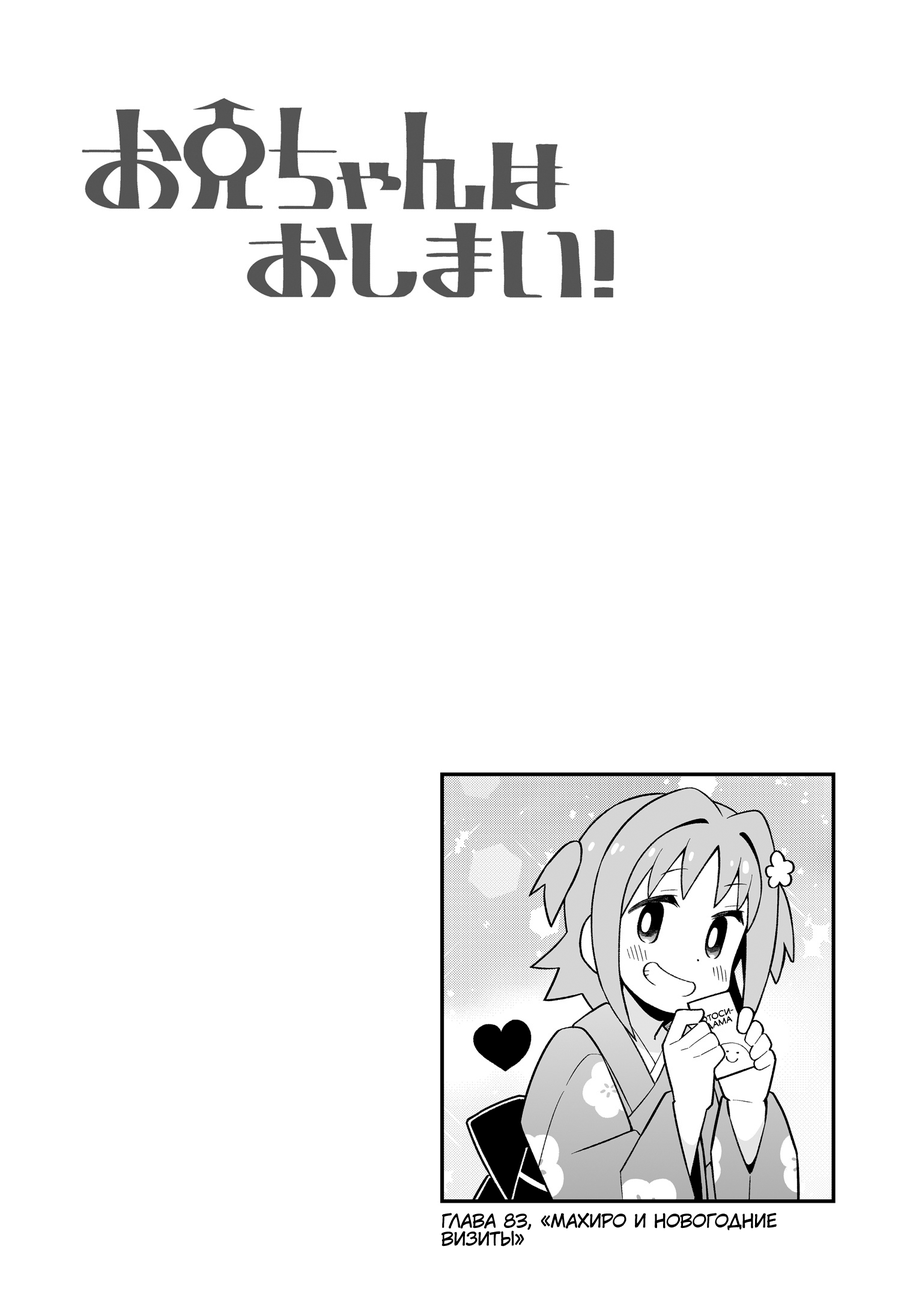
<style>
.page{position:relative;width:919px;height:1297px;background:#ffffff}
.page>*{position:absolute;margin:0}
.t1{font:7.8px "v_CCMonologous";color:#000000}
.t2{font:18px "KuraiVoice2";color:#000000;text-transform:uppercase}
</style>
<div class="page">
<p class="t1" style="left:701px;top:1009px;width:32px;height:22px;text-align:center;rotate:-19deg">Отоси-<br>дама</p>
<p class="t2" style="left:442px;top:1213px;width:335px;height:34px">Глава 83, «Махиро и новогодние<br>визиты»</p>
</div>
